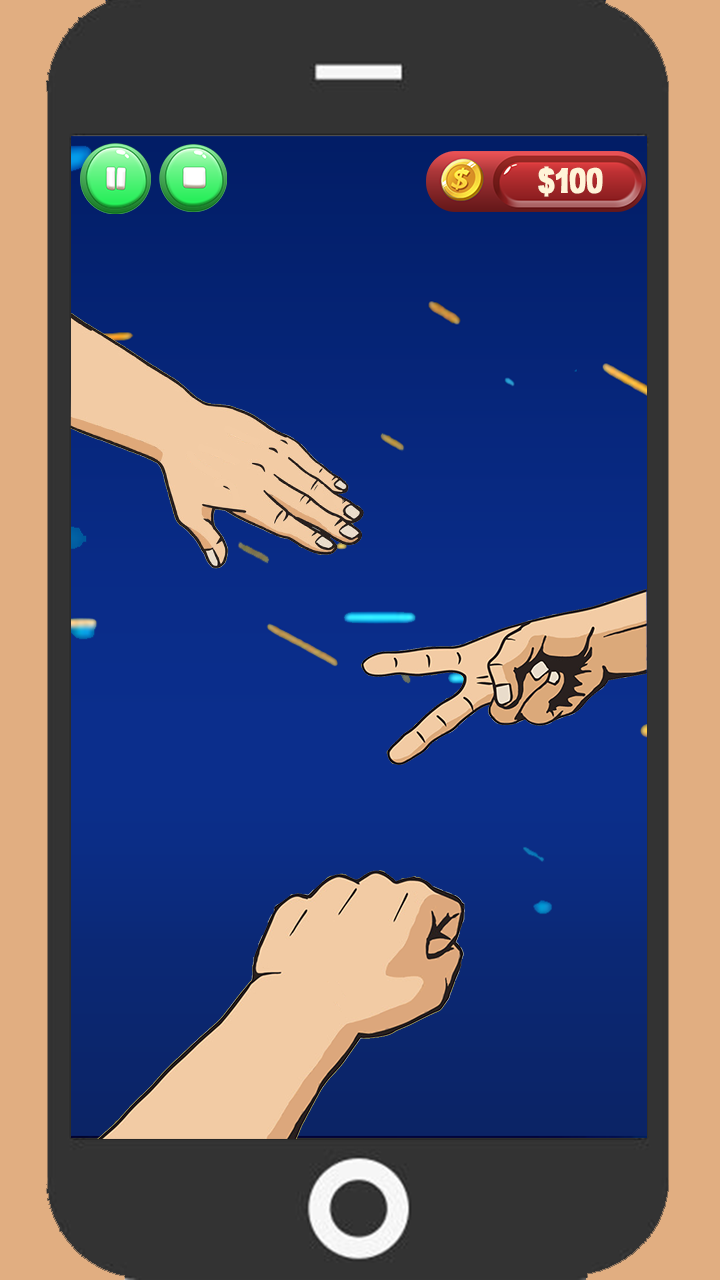
<style>
.page{position:relative;width:720px;height:1280px}
.page>*{position:absolute;margin:0}
.t1{font:30.7px "OMNIBLACK";color:#fff4d8}
</style>
<div class="page">
<p class="t1" style="left:538px;top:166px;width:65px;height:31px">$100</p>
</div>
